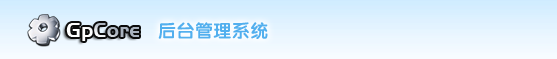
<style>
.page{position:relative;width:557px;height:59px}
.page>*{position:absolute;margin:0}
.t1{font:20.6px "HandelGothicEF-Bold";letter-spacing:0.025em}
.t2{font:18px "FZY4JW--GB1-0";letter-spacing:0.025em;color:#52afee}
</style>
<div class="page">
<p class="t1" style="left:66px;top:23px;width:73px;height:18px">GpCore</p>
<p class="t2" style="left:158px;top:22px;width:110px;height:17px">后台管理系统</p>
</div>
